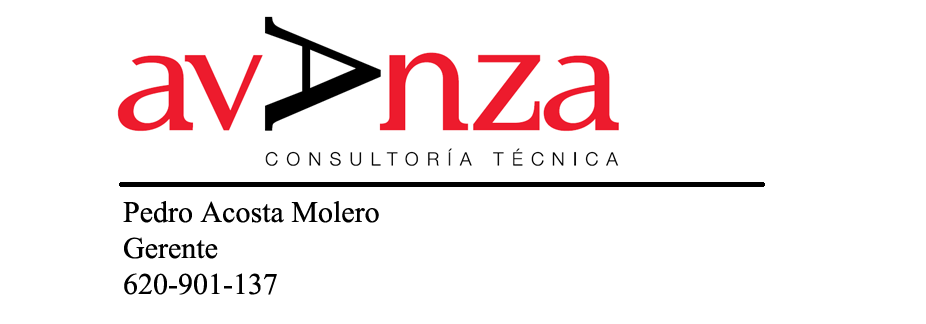
<style>
.page{position:relative;width:926px;height:324px;background:#ffffff}
.page>*{position:absolute;margin:0}
.t1{font:30px "TimesNewRomanPSMT";color:#000000}
</style>
<div class="page">
<p class="t1" style="left:123px;top:201px;width:256px;height:94px">Pedro Acosta Molero<br>Gerente<br>620-901-137</p>
</div>
